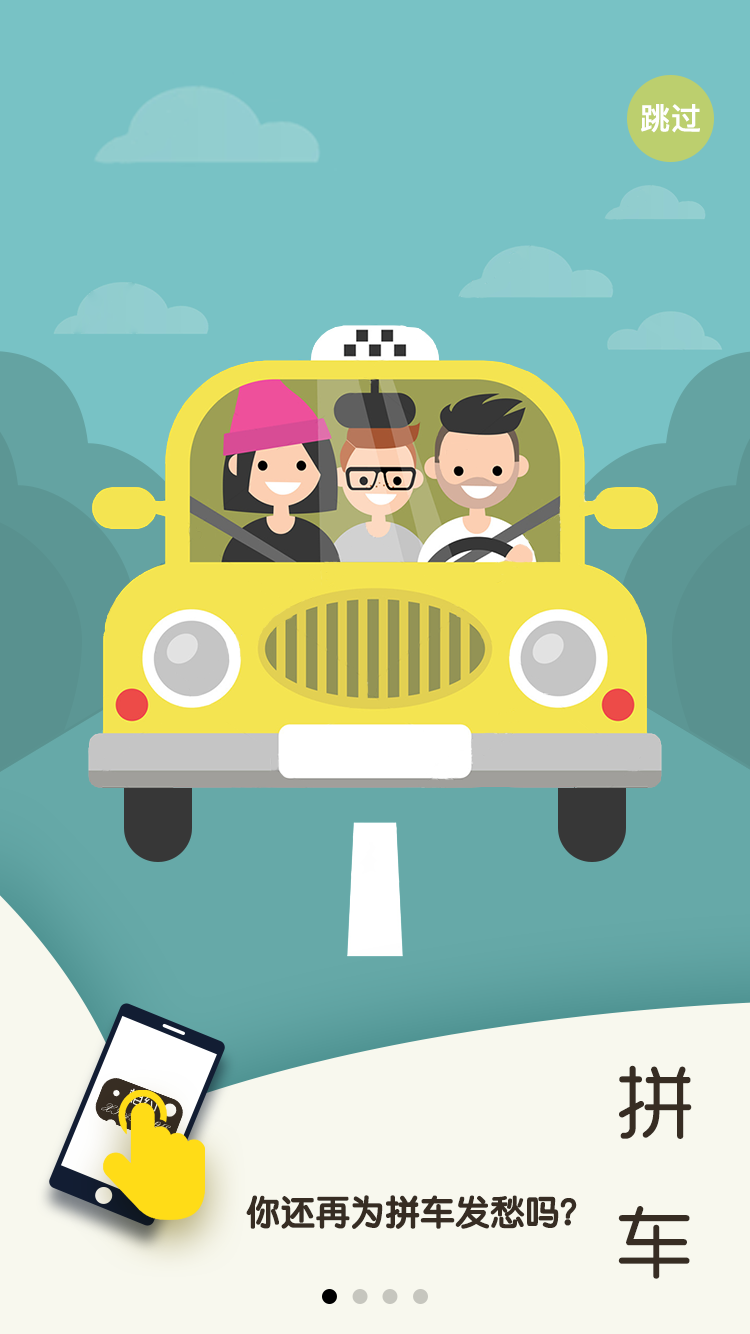
<style>
.page{position:relative;width:750px;height:1334px;background:#78c2c5}
.page>*{position:absolute;margin:0}
.t1{font:30px "PingFangSC-Medium";color:#ffffff;font-weight:bold}
.t2{font:80px "MFYueYuan_Noncommercial-Regular";color:#372d23;font-weight:bold}
.t3{font:34px "STYuanti-SC-Bold";color:#372d23;font-weight:bold}
</style>
<div class="page">
<p class="t1" style="left:641px;top:104px;width:59px;height:29px">跳过</p>
<p class="t2" style="left:618px;top:1065px;width:74px;height:214px;text-align:center">拼<br>车</p>
<p class="t3" style="left:246px;top:1195px;width:331px;height:34px">你还再为拼车发愁吗？</p>
</div>
